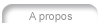
<style>
.page{position:relative;width:100px;height:23px;background:#ffffff}
.page>*{position:absolute;margin:0}
.t1{font:11px "ArialMT";color:#959598}
</style>
<div class="page">
<p class="t1" style="left:29px;top:12px;width:43px;height:11px">A propos</p>
</div>
